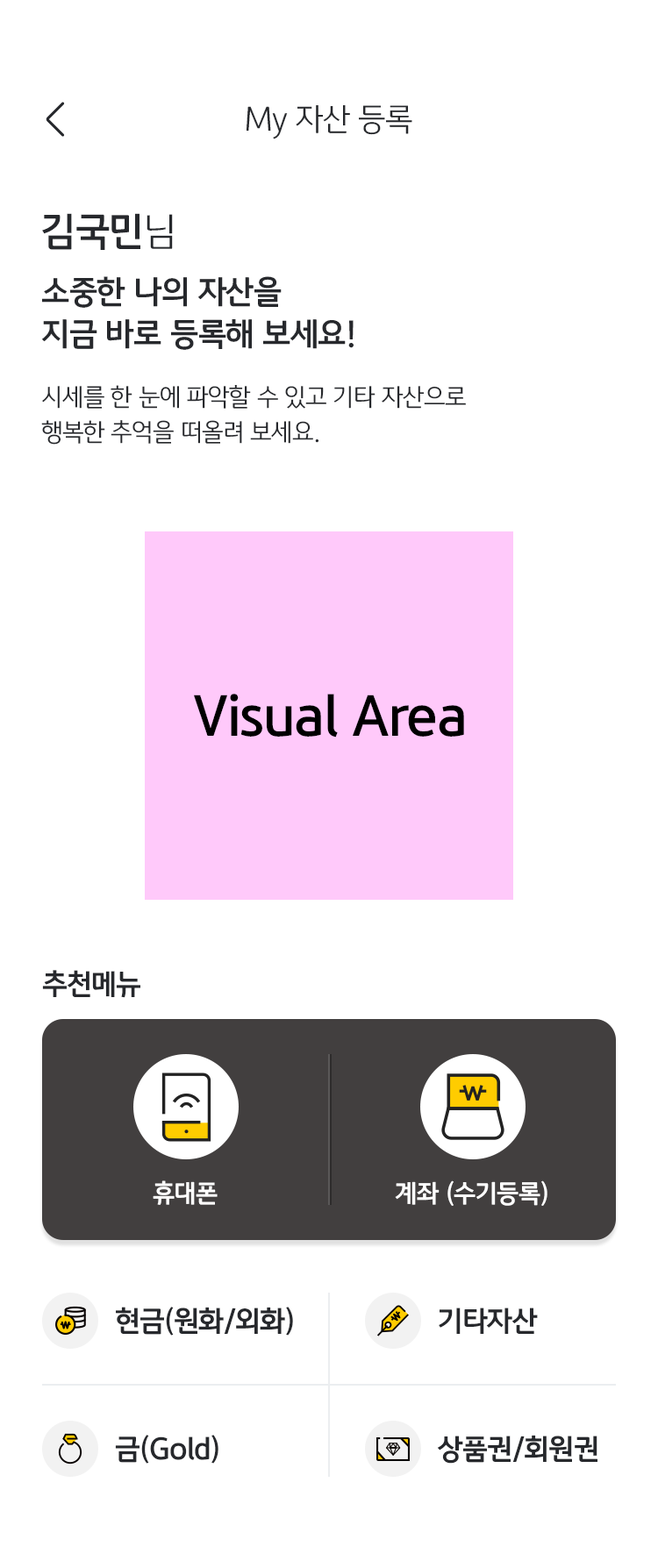
<style>
.page{position:relative;width:658px;height:1568px;background:#ffffff}
.page>*{position:absolute;margin:0}
.t1{font:31.6px "KBFGText-Light";letter-spacing:-0.02em;color:#26282c}
.t2{font:38.6px "KBFGText-Bold";letter-spacing:-0.02em;color:#26282c}
.t3{font:38.6px "KBFGText-Light";letter-spacing:-0.02em;color:#26282c}
.t4{font:31.6px/42.1px "KBFGText-Bold";letter-spacing:-0.02em;color:#26282c}
.t5{font:24.6px/35.1px "KBFGText-Light";letter-spacing:-0.02em;color:#26282c}
.t6{font:52.6px "KBFGText-Bold";letter-spacing:-0.02em;color:#000000}
.t7{font:28.1px "KBFGText-Bold";letter-spacing:-0.02em;color:#26282c}
.t8{font:24.6px "KBFGText-Bold";letter-spacing:-0.02em;color:#ffffff}
</style>
<div class="page">
<p class="t1" style="left:246px;top:105px;width:166px;height:34px">My 자산 등록</p>
<p class="t2" style="left:42px;top:213px;width:131px;height:37px">김국민<span class="t3">님</span></p>
<p class="t4" style="left:41px;top:276px;width:312px;height:74px">소중한 나의 자산을 <br>지금 바로 등록해 보세요!</p>
<p class="t5" style="left:41px;top:385px;width:425px;height:60px">시세를 한 눈에 파악할 수 있고 기타 자산으로 <br>행복한 추억을 떠올려 보세요.</p>
<p class="t6" style="left:194px;top:694px;width:270px;height:44px">Visual Area</p>
<p class="t7" style="left:42px;top:970px;width:98px;height:28px">추천메뉴</p>
<p class="t8" style="left:153px;top:1180px;width:64px;height:25px">휴대폰</p>
<p class="t8" style="left:395px;top:1180px;width:152px;height:26px">계좌 (수기등록)</p>
<p class="t7" style="left:116px;top:1307px;width:177px;height:29px">현금(원화/외화)</p>
<p class="t7" style="left:438px;top:1308px;width:100px;height:26px">기타자산</p>
<p class="t7" style="left:115px;top:1435px;width:103px;height:29px">금(Gold)</p>
<p class="t7" style="left:437px;top:1435px;width:160px;height:29px">상품권/회원권</p>
</div>
